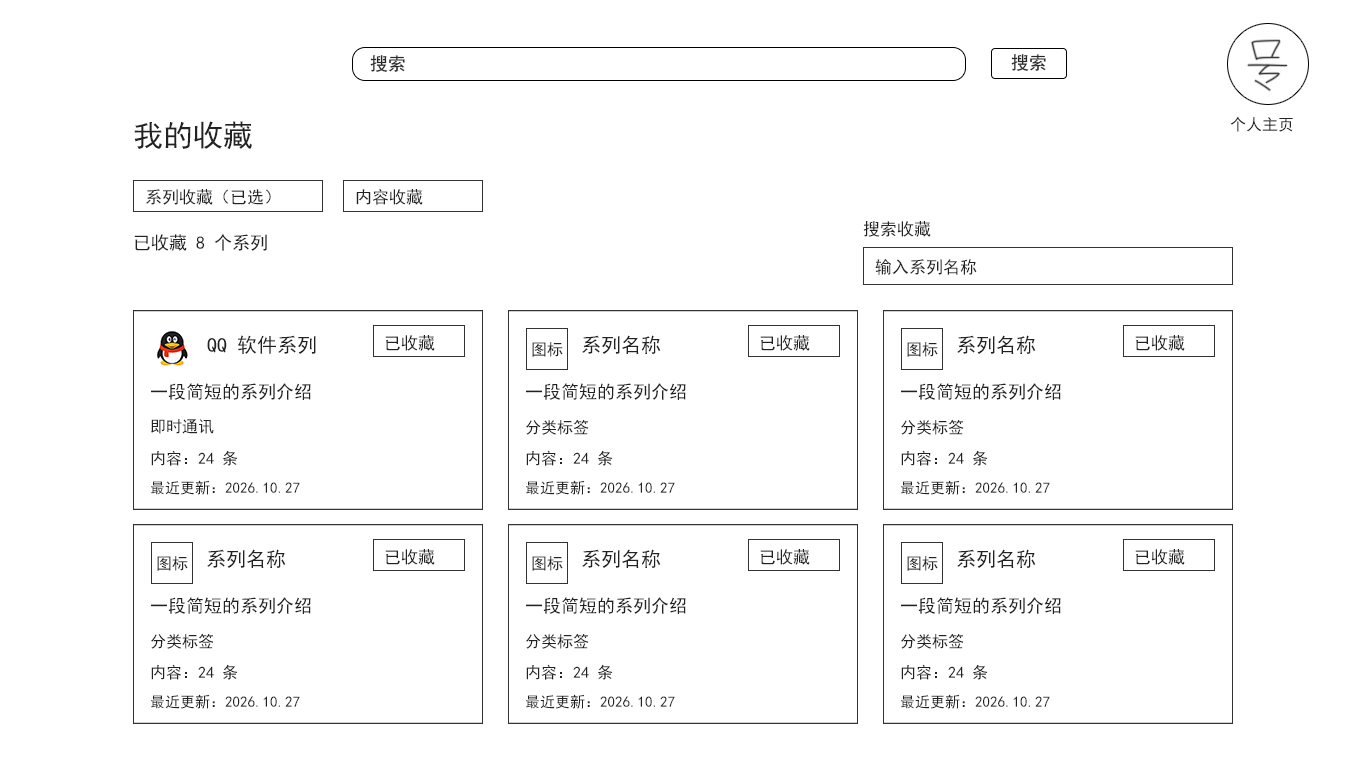
<style>
.page{position:relative;width:1366px;height:768px;background:#ffffff}
.page>*{position:absolute;margin:0}
.t1{font:18px "SimHei";color:#282828}
.t2{font:30px "SimHei";color:#222222}
.t3{font:16px "SimHei";color:#222222}
.t4{font:17px "SimHei";color:#222222}
.t5{font:18px "SimHei";color:#222222}
.t6{font:20px "SimHei";color:#222222}
.t7{font:15px "SimHei";color:#222222}
</style>
<div class="page">
<p class="t1" style="left:1011px;top:54px;width:35px;height:17px">搜索</p>
<p class="t1" style="left:370px;top:55px;width:35px;height:17px">搜索</p>
<p class="t2" style="left:134px;top:121px;width:118px;height:28px">我的收藏</p>
<p class="t3" style="left:1230px;top:116px;width:63px;height:16px">个人主页</p>
<p class="t4" style="left:146px;top:189px;width:125px;height:16px">系列收藏（已选）</p>
<p class="t4" style="left:356px;top:189px;width:67px;height:16px">内容收藏</p>
<p class="t4" style="left:863px;top:221px;width:68px;height:16px">搜索收藏</p>
<p class="t5" style="left:134px;top:234px;width:133px;height:17px">已收藏 8 个系列</p>
<p class="t4" style="left:875px;top:259px;width:102px;height:16px">输入系列名称</p>
<p class="t6" style="left:207px;top:335px;width:109px;height:19px">QQ 软件系列</p>
<p class="t4" style="left:385px;top:335px;width:50px;height:16px">已收藏</p>
<p class="t3" style="left:532px;top:342px;width:31px;height:15px">图标</p>
<p class="t6" style="left:582px;top:335px;width:79px;height:19px">系列名称</p>
<p class="t4" style="left:760px;top:335px;width:50px;height:16px">已收藏</p>
<p class="t3" style="left:907px;top:342px;width:31px;height:15px">图标</p>
<p class="t6" style="left:957px;top:335px;width:79px;height:19px">系列名称</p>
<p class="t4" style="left:1135px;top:335px;width:50px;height:16px">已收藏</p>
<p class="t5" style="left:151px;top:383px;width:160px;height:17px">一段简短的系列介绍</p>
<p class="t5" style="left:526px;top:383px;width:160px;height:17px">一段简短的系列介绍</p>
<p class="t5" style="left:901px;top:383px;width:160px;height:17px">一段简短的系列介绍</p>
<p class="t3" style="left:151px;top:419px;width:63px;height:15px">即时通讯</p>
<p class="t3" style="left:526px;top:419px;width:63px;height:16px">分类标签</p>
<p class="t3" style="left:901px;top:419px;width:63px;height:16px">分类标签</p>
<p class="t3" style="left:151px;top:450px;width:87px;height:16px">内容：24 条</p>
<p class="t3" style="left:526px;top:450px;width:87px;height:16px">内容：24 条</p>
<p class="t3" style="left:901px;top:450px;width:87px;height:16px">内容：24 条</p>
<p class="t7" style="left:151px;top:480px;width:149px;height:15px">最近更新：2026.10.27</p>
<p class="t7" style="left:526px;top:480px;width:149px;height:15px">最近更新：2026.10.27</p>
<p class="t7" style="left:901px;top:480px;width:149px;height:15px">最近更新：2026.10.27</p>
<p class="t3" style="left:157px;top:556px;width:31px;height:15px">图标</p>
<p class="t6" style="left:207px;top:549px;width:79px;height:19px">系列名称</p>
<p class="t4" style="left:385px;top:549px;width:50px;height:16px">已收藏</p>
<p class="t3" style="left:532px;top:556px;width:31px;height:15px">图标</p>
<p class="t6" style="left:582px;top:549px;width:79px;height:19px">系列名称</p>
<p class="t4" style="left:760px;top:549px;width:50px;height:16px">已收藏</p>
<p class="t3" style="left:907px;top:556px;width:31px;height:15px">图标</p>
<p class="t6" style="left:957px;top:549px;width:79px;height:19px">系列名称</p>
<p class="t4" style="left:1135px;top:549px;width:50px;height:16px">已收藏</p>
<p class="t5" style="left:151px;top:597px;width:160px;height:17px">一段简短的系列介绍</p>
<p class="t5" style="left:526px;top:597px;width:160px;height:17px">一段简短的系列介绍</p>
<p class="t5" style="left:901px;top:597px;width:160px;height:17px">一段简短的系列介绍</p>
<p class="t3" style="left:151px;top:633px;width:63px;height:16px">分类标签</p>
<p class="t3" style="left:526px;top:633px;width:63px;height:16px">分类标签</p>
<p class="t3" style="left:901px;top:633px;width:63px;height:16px">分类标签</p>
<p class="t3" style="left:151px;top:664px;width:87px;height:16px">内容：24 条</p>
<p class="t3" style="left:526px;top:664px;width:87px;height:16px">内容：24 条</p>
<p class="t3" style="left:901px;top:664px;width:87px;height:16px">内容：24 条</p>
<p class="t7" style="left:151px;top:694px;width:149px;height:15px">最近更新：2026.10.27</p>
<p class="t7" style="left:526px;top:694px;width:149px;height:15px">最近更新：2026.10.27</p>
<p class="t7" style="left:901px;top:694px;width:149px;height:15px">最近更新：2026.10.27</p>
</div>
